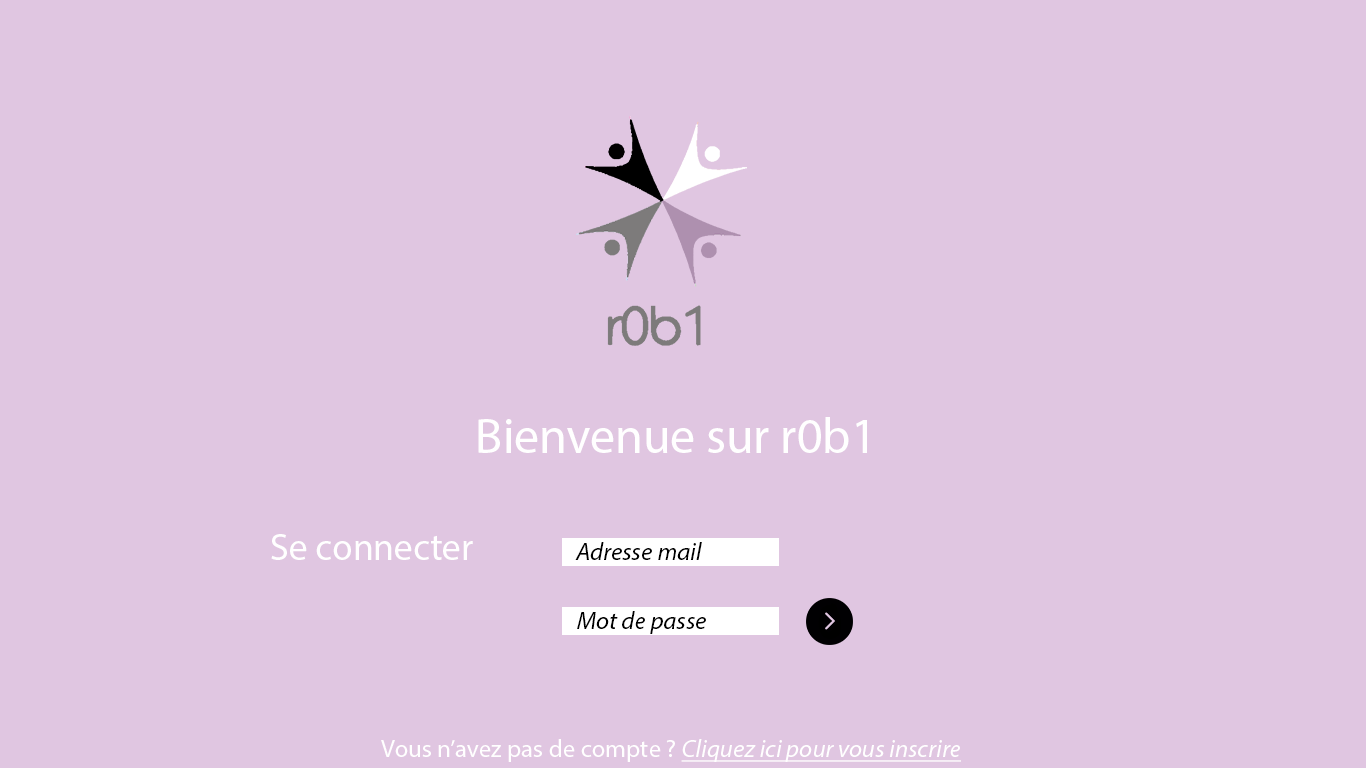
<style>
.page{position:relative;width:1366px;height:768px;background:#e0c6e1}
.page>*{position:absolute;margin:0}
.t1{font:12px "MyriadPro-Regular";color:#ffffff}
.t2{font:37.5px "MyriadPro-Regular";color:#ffffff}
.t3{font:25px "MyriadPro-It";color:#000000}
.t4{font:25px "MyriadPro-It";color:#ffffff;text-decoration:underline}
.t5{font:25px "MyriadPro-Regular";color:#ffffff}
</style>
<div class="page">
<p class="t1" style="left:478px;top:417px;width:389px;height:36px">Bienvenue sur r0b1</p>
<p class="t2" style="left:271px;top:534px;width:202px;height:26px">Se connecter</p>
<p class="t3" style="left:575px;top:542px;width:127px;height:18px">Adresse mail</p>
<p class="t3" style="left:577px;top:611px;width:129px;height:23px">Mot de passe</p>
<p class="t4" style="left:381px;top:739px;width:580px;height:23px"><span class="t5">Vous n’avez pas de compte ? </span>Cliquez ici pour vous inscrire</p>
</div>
